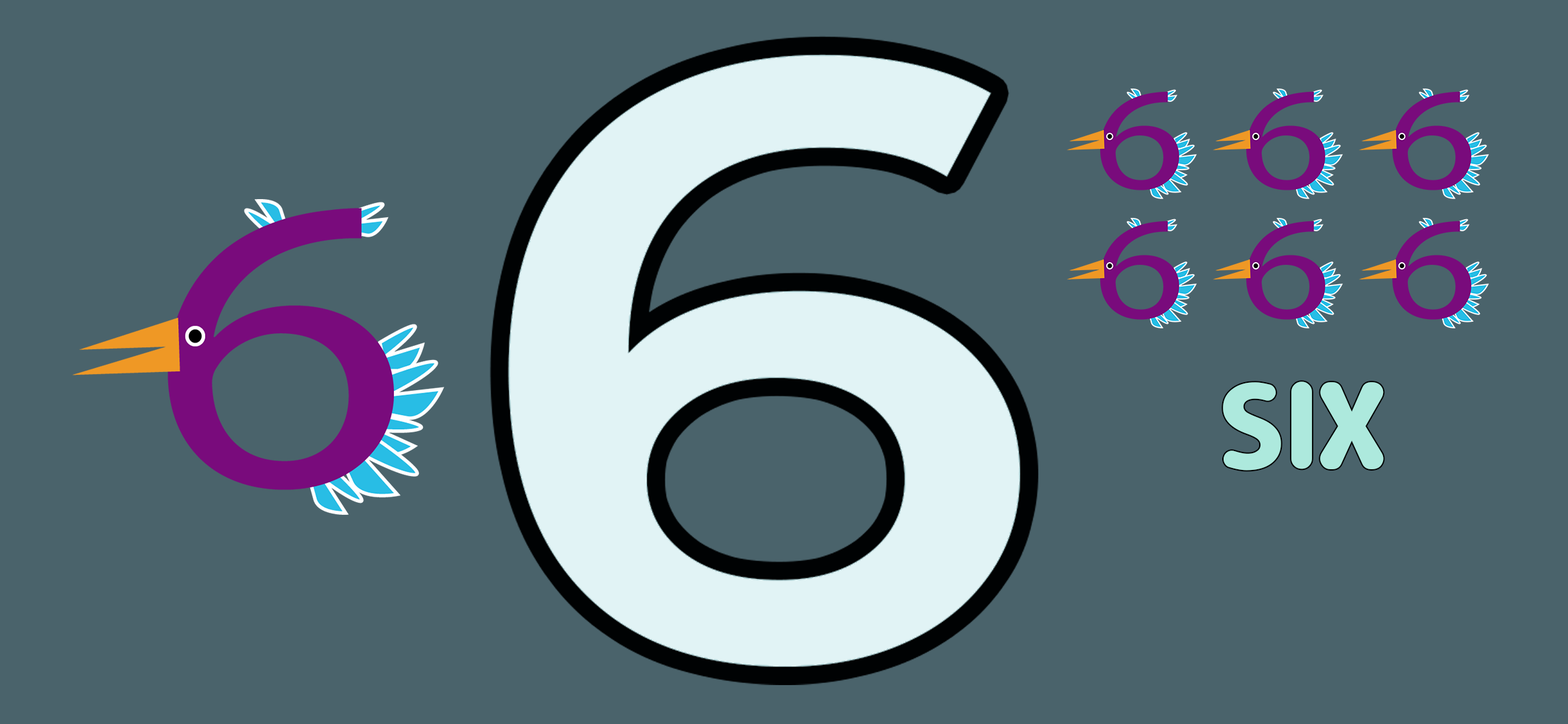
<style>
.page{position:relative;width:1568px;height:724px;background:#4a636b}
.page>*{position:absolute;margin:0}
.t1{font:139.6px "Dyuthi";color:#ade9dd}
</style>
<div class="page">
<p class="t1" style="left:1223px;top:381px;width:161px;height:89px">SIX</p>
</div>
